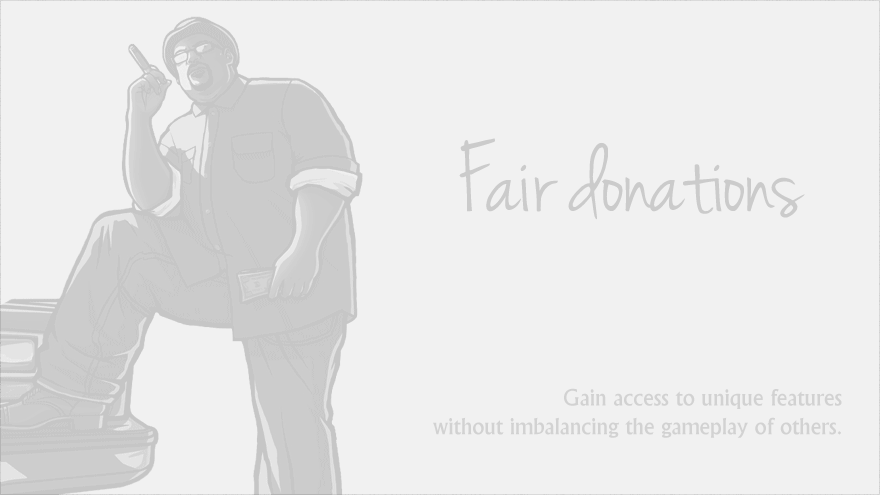
<style>
.page{position:relative;width:880px;height:495px;background:#f1f1f1}
.page>*{position:absolute;margin:0}
.t1{font:105px "JennaSue";color:#cbcbcb}
.t2{font:24px "Narkisim";color:#d2d2d2}
</style>
<div class="page">
<p class="t1" style="left:459px;top:138px;width:346px;height:82px">Fair donations</p>
<p class="t2" style="left:433px;top:388px;width:409px;height:50px;text-align:right">Gain access to unique features <br>without imbalancing the gameplay of others.</p>
</div>
